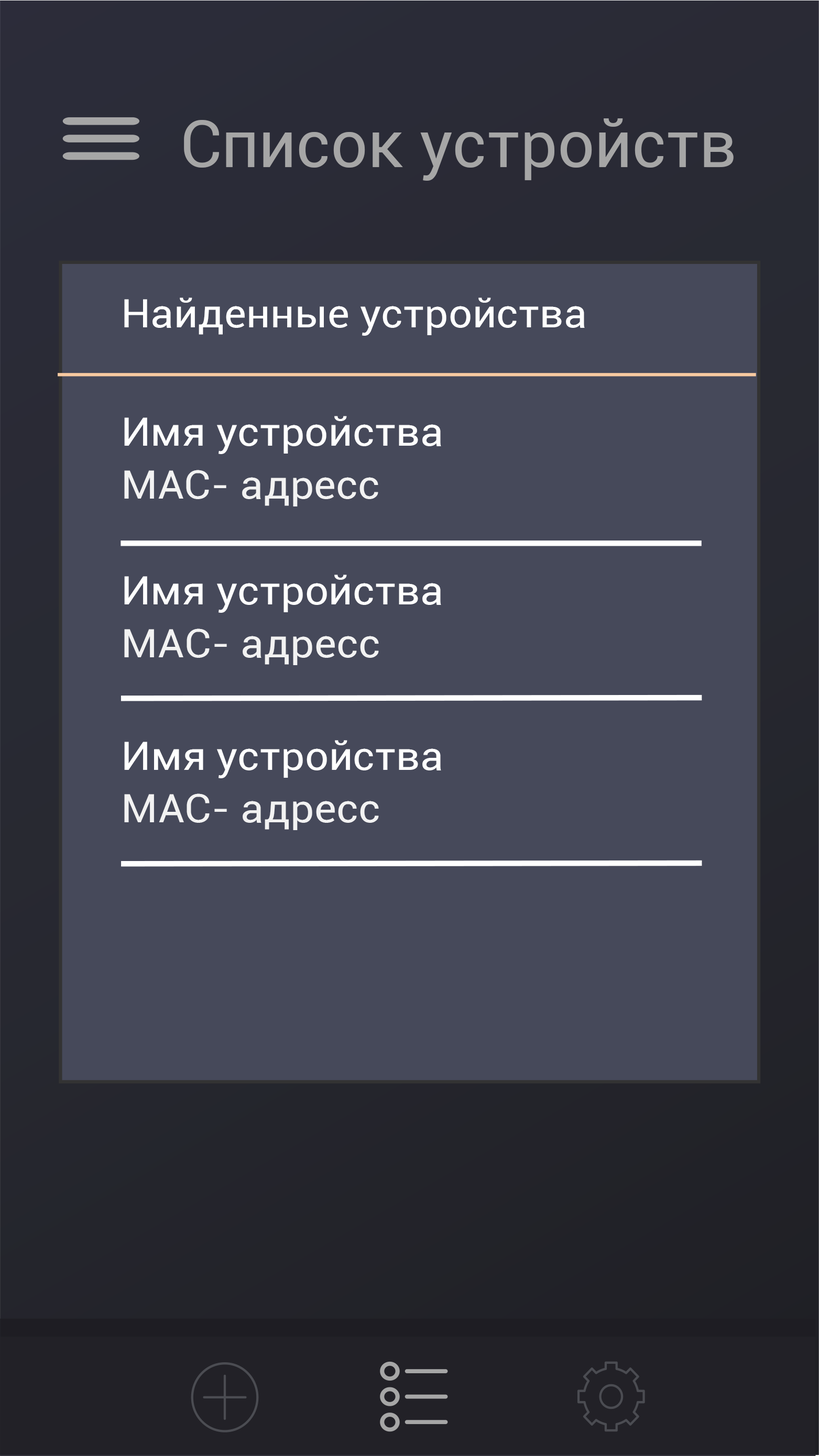
<style>
.page{position:relative;width:819px;height:1456px;background:#46495a}
.page>*{position:absolute;margin:0}
.t1{font:65.5px "Roboto-Regular";color:#a6a6a6}
.t2{font:39.3px "Roboto-Regular";color:#ffffff;scale:1.07 1}
.t3{font:39.3px "Roboto-Regular";color:#f2f2f2;scale:1.07 1}
</style>
<div class="page">
<p class="t1" style="left:184px;top:118px;width:549px;height:63px">Список устройств</p>
<p class="t2" style="left:124px;top:298px;width:461px;height:38px">Найденные устройства</p>
<p class="t2" style="left:124px;top:416px;width:317px;height:38px">Имя устройства</p>
<p class="t3" style="left:124px;top:470px;width:254px;height:37px">МАС- адресс</p>
<p class="t2" style="left:124px;top:575px;width:317px;height:38px">Имя устройства</p>
<p class="t3" style="left:124px;top:629px;width:255px;height:36px">МАС- адресс</p>
<p class="t2" style="left:124px;top:740px;width:317px;height:38px">Имя устройства</p>
<p class="t3" style="left:124px;top:794px;width:255px;height:36px">МАС- адресс</p>
</div>
